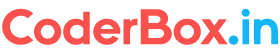
<style>
.page{position:relative;width:280px;height:56px;background:#ffffff}
.page>*{position:absolute;margin:0}
.t1{font:49.6px "and-black";color:#fb514d;scale:1.03 1}
.t2{font:49.6px "and-black";color:#15b6f9;scale:1.03 1}
</style>
<div class="page">
<p class="t1" style="left:2px;top:8px;width:276px;height:37px">CoderBox<span class="t2">.in</span></p>
</div>
